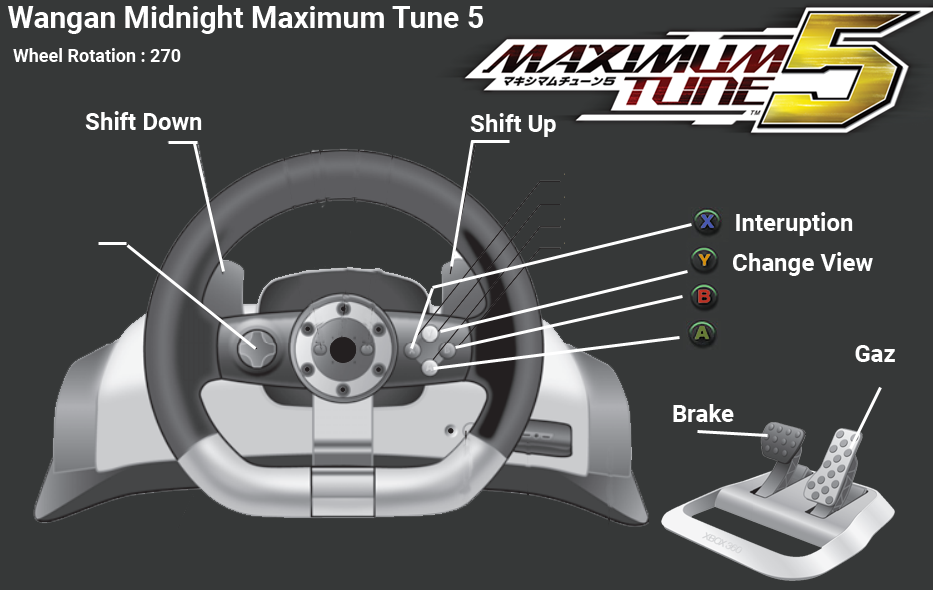
<style>
.page{position:relative;width:933px;height:590px;background:#363838}
.page>*{position:absolute;margin:0}
.t1{font:30px "Roboto-Bold";color:#ffffff}
.t2{font:18px "Roboto-Bold";color:#ffffff}
.t3{font:24px "Roboto-Bold";color:#ffffff}
</style>
<div class="page">
<p class="t1" style="left:8px;top:5px;width:475px;height:29px">Wangan Midnight Maximum Tune 5</p>
<p class="t2" style="left:13px;top:48px;width:168px;height:14px">Wheel Rotation : 270</p>
<p class="t3" style="left:85px;top:111px;width:117px;height:19px">Shift Down</p>
<p class="t3" style="left:470px;top:113px;width:86px;height:24px">Shift Up</p>
<p class="t3" style="left:736px;top:212px;width:117px;height:24px">Interuption</p>
<p class="t3" style="left:733px;top:252px;width:140px;height:24px">Change View</p>
<p class="t3" style="left:855px;top:345px;width:40px;height:17px">Gaz</p>
<p class="t3" style="left:673px;top:404px;width:61px;height:18px">Brake</p>
</div>
